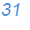
<style>
.page{position:relative;width:30px;height:30px;background:#ffffff}
.page>*{position:absolute;margin:0}
.t1{font:18px "ArialMT";color:#4e92df;font-style:italic}
</style>
<div class="page">
<p class="t1" style="left:1px;top:3px;width:19px;height:13px">31</p>
</div>
